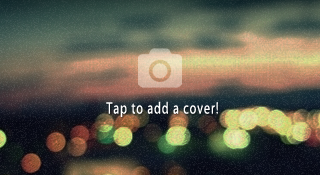
<style>
.page{position:relative;width:320px;height:175px}
.page>*{position:absolute;margin:0}
.t1{font:16.5px "MyriadPro-Regular";letter-spacing:0.08em;color:#ffffff;scale:0.73 1}
</style>
<div class="page">
<p class="t1" style="left:106px;top:101px;width:112px;height:16px">Tap to add a cover!</p>
</div>
